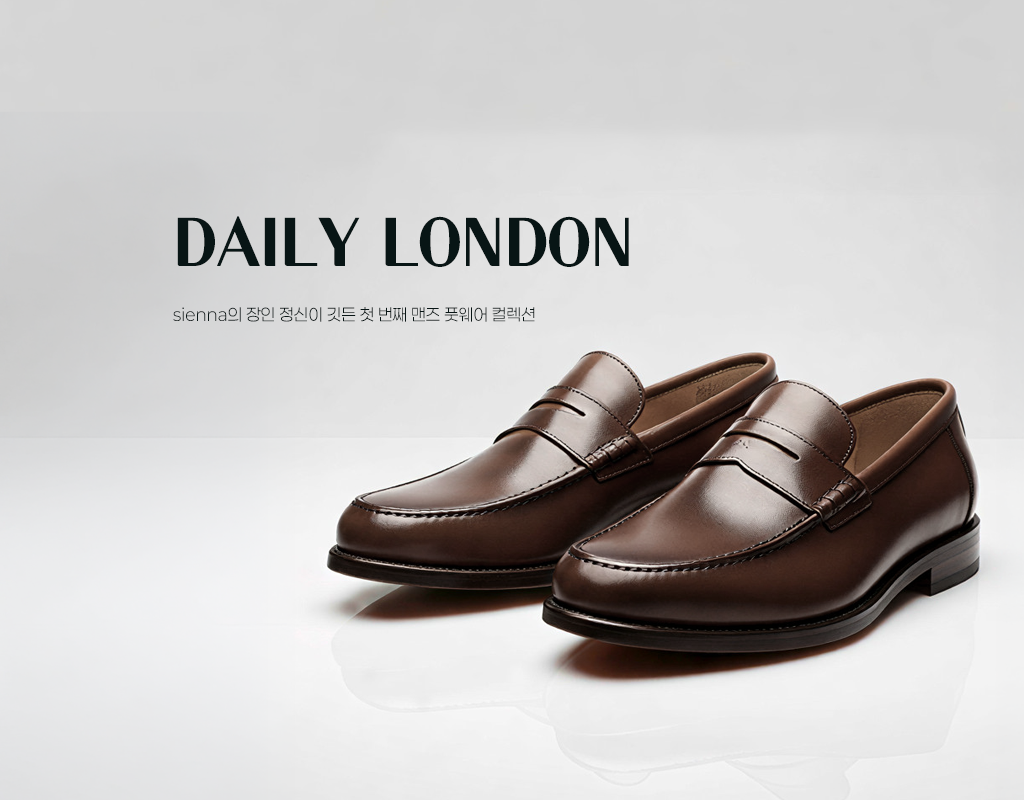
<style>
.page{position:relative;width:1024px;height:800px}
.page>*{position:absolute;margin:0}
.t1{font:66.7px "Cafe24Dangdanghae";color:#081515;text-transform:uppercase}
.t2{font:16.7px "Paperlogy-3Light";color:#081515;text-transform:uppercase}
.t3{font:16.7px "Paperlogy-3Light";color:#081515}
</style>
<div class="page">
<p class="t1" style="left:177px;top:216px;width:452px;height:51px">Daily London</p>
<p class="t2" style="left:173px;top:307px;width:362px;height:15px"><span class="t3">sienna</span>의 장인 정신이 깃든 첫 번째 맨즈 풋웨어 컬렉션</p>
</div>
